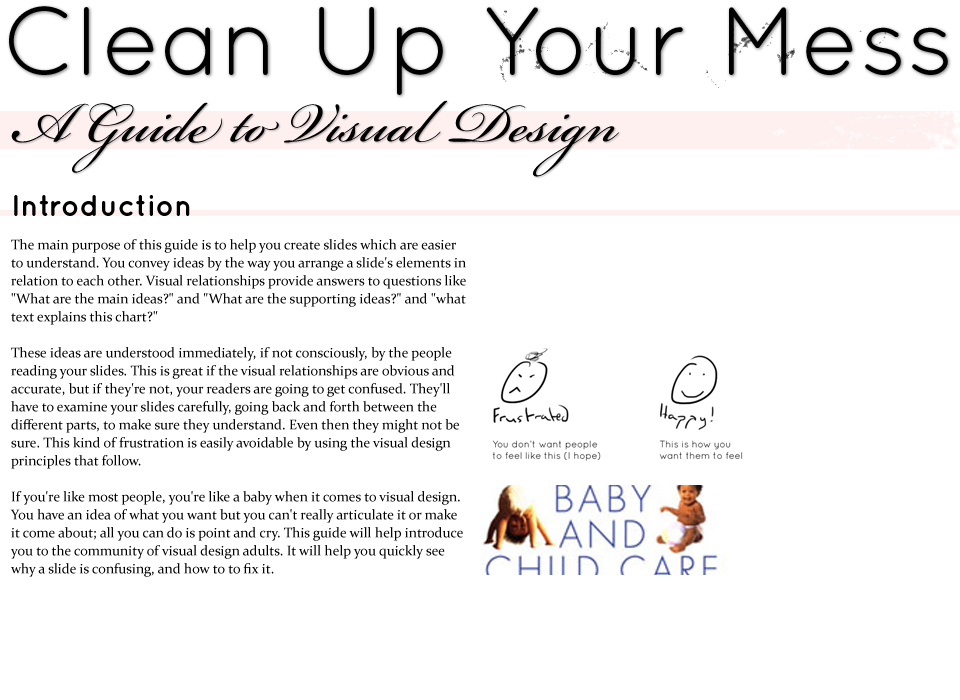
<style>
.page{position:relative;width:960px;height:700px;background:#ffffff}
.page>*{position:absolute;margin:0}
.t1{font:97px "QuicksandBook-Regular";color:#000000}
.t2{font:87px "BickhamScriptPro-Regular";color:#000000}
.t3{font:30px "QuicksandBold-Regular";color:#000000}
.t4{font:14px/18px "Constantia";color:#000000}
</style>
<div class="page">
<p class="t1" style="left:9px;top:6px;width:939px;height:89px">Clean Up Your Mess</p>
<p class="t2" style="left:11px;top:100px;width:609px;height:77px">A Guide to Visual Design</p>
<p class="t3" style="left:14px;top:195px;width:176px;height:21px">Introduction</p>
<p class="t4" style="left:10px;top:239px;width:456px;height:338px">The main purpose of this guide is to help you create slides which are easier to understand. You convey ideas by the way you arrange a slide's elements in relation to each other. Visual relationships provide answers to questions like "What are the main ideas?" and "What are the supporting ideas?" and "what text explains this chart?"<br><br>These ideas are understood immediately, if not consciously, by the people reading your slides. This is great if the visual relationships are obvious and accurate, but if they're not, your readers are going to get confused. They'll have to examine your slides carefully, going back and forth between the different parts, to make sure they understand. Even then they might not be sure. This kind of frustration is easily avoidable by using the visual design principles that follow.<br><br>If you're like most people, you're like a baby when it comes to visual design. You have an idea of what you want but you can't really articulate it or make it come about; all you can do is point and cry. This guide will help introduce you to the community of visual design adults. It will help you quickly see why a slide is confusing, and how to to fix it.</p>
</div>
